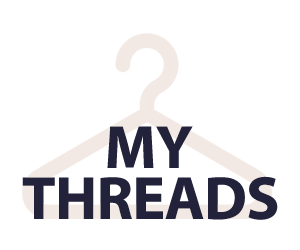
<style>
.page{position:relative;width:300px;height:250px;background:#ffffff}
.page>*{position:absolute;margin:0}
.t1{font:61.3px "MyriadPro-Bold";letter-spacing:-0.01em;color:#22223b}
</style>
<div class="page">
<p class="t1" style="left:107px;top:126px;width:86px;height:42px">MY</p>
<p class="t1" style="left:22px;top:176px;width:256px;height:44px">THREADS</p>
</div>
